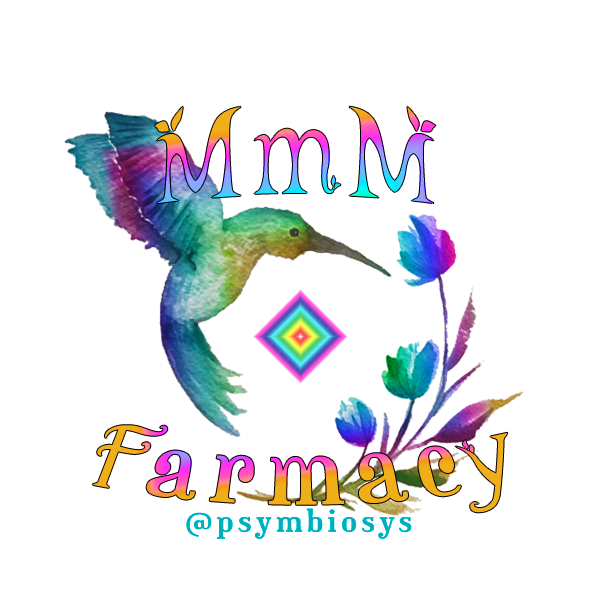
<style>
.page{position:relative;width:600px;height:600px;background:#ffffff}
.page>*{position:absolute;margin:0}
.t1{font:75px "leaf1";letter-spacing:0.12em;scale:1.32 1}
.t2{font:90px "Euphorigenic-Regular";letter-spacing:0.125em;scale:1.32 1}
.t3{font:90px "Harrington";letter-spacing:-0.02em;scale:1.32 1}
.t4{font:90px "Euphorigenic-Regular";letter-spacing:0.12em;scale:1.32 1}
.t5{font:90px "Euphorigenic-Regular";scale:1.32 1}
.t6{font:100px "leaf1";scale:1.32 1}
.t7{font:30px "Euphorigenic-Regular";letter-spacing:0.12em;color:#06aebd;scale:1.32 1}
</style>
<div class="page">
<p class="t1" style="left:154px;top:84px;width:286px;height:120px">MmM</p>
<p class="t2" style="left:93px;top:425px;width:415px;height:88px"><span class="t3">F</span>ar<span class="t4">ma</span><span class="t5">c</span><span class="t6">y</span></p>
<p class="t7" style="left:186px;top:508px;width:226px;height:31px">@psymbiosys</p>
</div>
